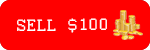
<style>
.page{position:relative;width:150px;height:50px;background:#ff0000}
.page>*{position:absolute;margin:0}
.t1{font:18px "Courier";color:#ffffff}
</style>
<div class="page">
<p class="t1" style="left:17px;top:19px;width:39px;height:12px">SELL</p>
<p class="t1" style="left:68px;top:18px;width:39px;height:15px">$100</p>
</div>
